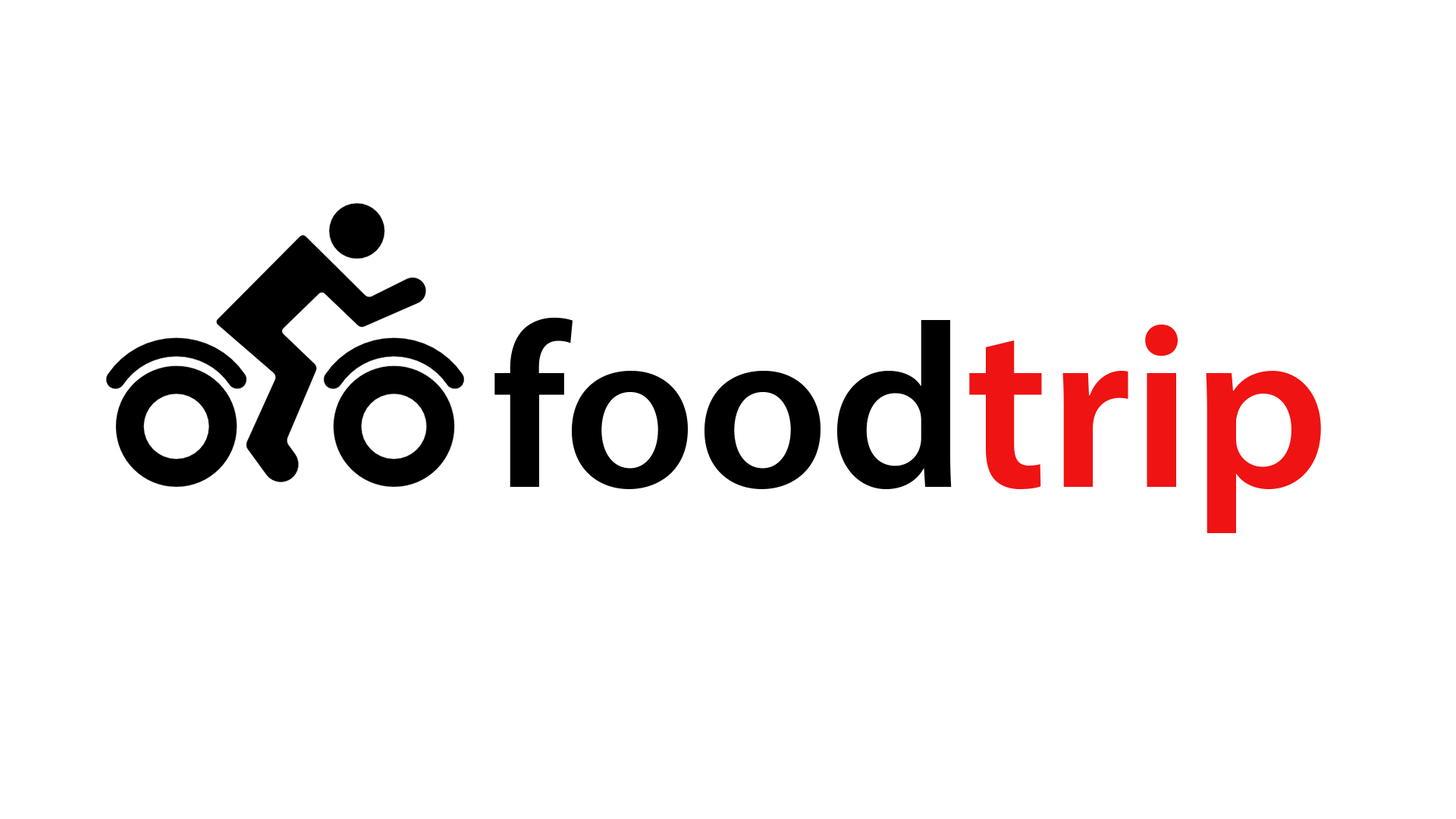
<style>
.page{position:relative;width:1456px;height:819px;background:#ffffff}
.page>*{position:absolute;margin:0}
.t1{font:235.1px "MyriadPro-Semibold";color:#000000}
.t2{font:235.1px "MyriadPro-Semibold";color:#ef1313}
</style>
<div class="page">
<p class="t1" style="left:494px;top:317px;width:827px;height:216px">food<span class="t2">trip</span></p>
</div>
